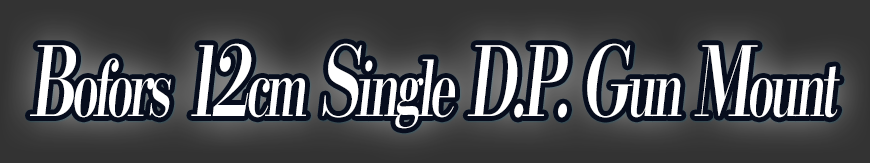
<style>
.page{position:relative;width:870px;height:163px}
.page>*{position:absolute;margin:0}
.t1{font:96px "KochoStd-Heavy";letter-spacing:-0.08em;color:#ffffff;font-style:italic;scale:0.63 1}
.t2{font:76.8px "KochoStd-Heavy";letter-spacing:-0.08em;color:#ffffff;font-style:italic;scale:0.63 1}
</style>
<div class="page">
<p class="t1" style="left:30px;top:43px;width:810px;height:86px">B<span class="t2">ofors</span> 12<span class="t2">cm</span> S<span class="t2">ingle</span> D.P. G<span class="t2">un</span> M<span class="t2">ount</span></p>
</div>
